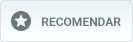
<style>
.page{position:relative;width:133px;height:42px}
.page>*{position:absolute;margin:0}
.t1{font:12px "Roboto-Bold";color:#667780;text-transform:uppercase}
</style>
<div class="page">
<p class="t1" style="left:42px;top:17px;width:79px;height:9px">recomendar</p>
</div>
